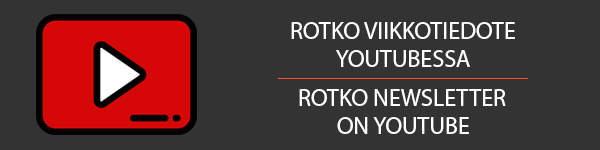
<style>
.page{position:relative;width:600px;height:150px;background:#333333}
.page>*{position:absolute;margin:0}
.t1{font:24px "MyriadPro-Regular";color:#ffffff;text-transform:uppercase}
</style>
<div class="page">
<p class="t1" style="left:291px;top:22px;width:224px;height:17px">Rotko viikkotiedote</p>
<p class="t1" style="left:336px;top:50px;width:134px;height:17px">youtubessa</p>
<p class="t1" style="left:299px;top:89px;width:207px;height:17px">Rotko newsletter</p>
<p class="t1" style="left:337px;top:117px;width:132px;height:17px">on youtube</p>
</div>
